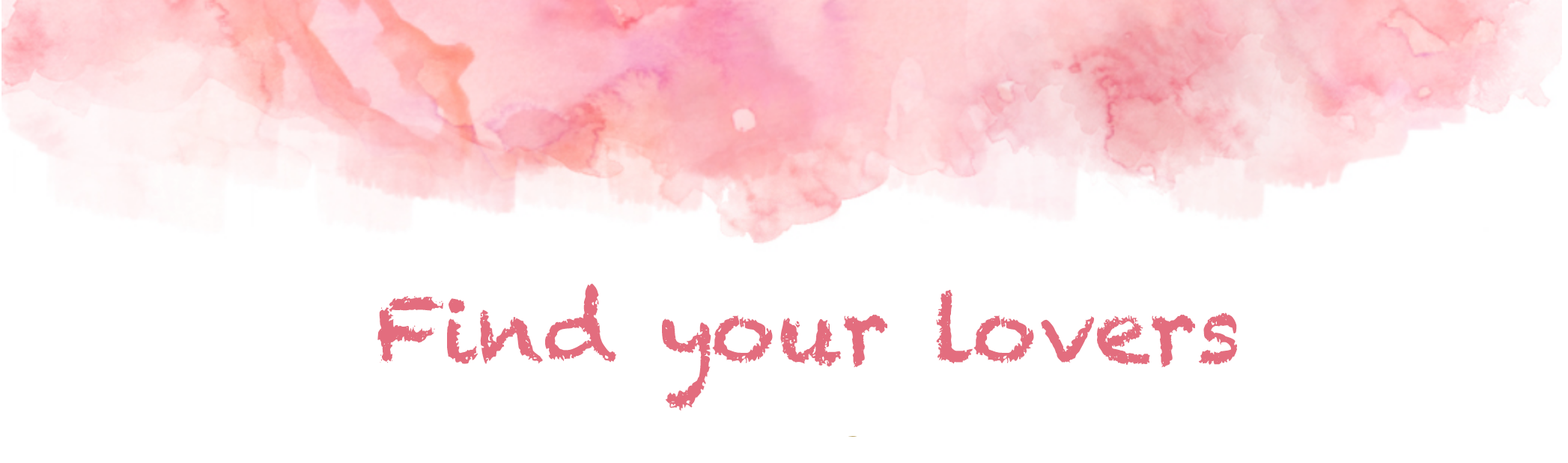
<style>
.page{position:relative;width:1568px;height:463px;background:#ffffff}
.page>*{position:absolute;margin:0}
.t1{font:89.9px "Chalkduster";color:#e36d7e}
</style>
<div class="page">
<p class="t1" style="left:377px;top:283px;width:860px;height:127px">Find your lovers</p>
</div>
